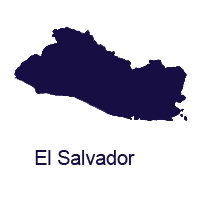
<style>
.page{position:relative;width:200px;height:200px;background:#ffffff}
.page>*{position:absolute;margin:0}
.t1{font:20.8px "ArialMT";color:#170f44;scale:0.94 1}
</style>
<div class="page">
<p class="t1" style="left:35px;top:150px;width:100px;height:15px">El Salvador</p>
</div>
